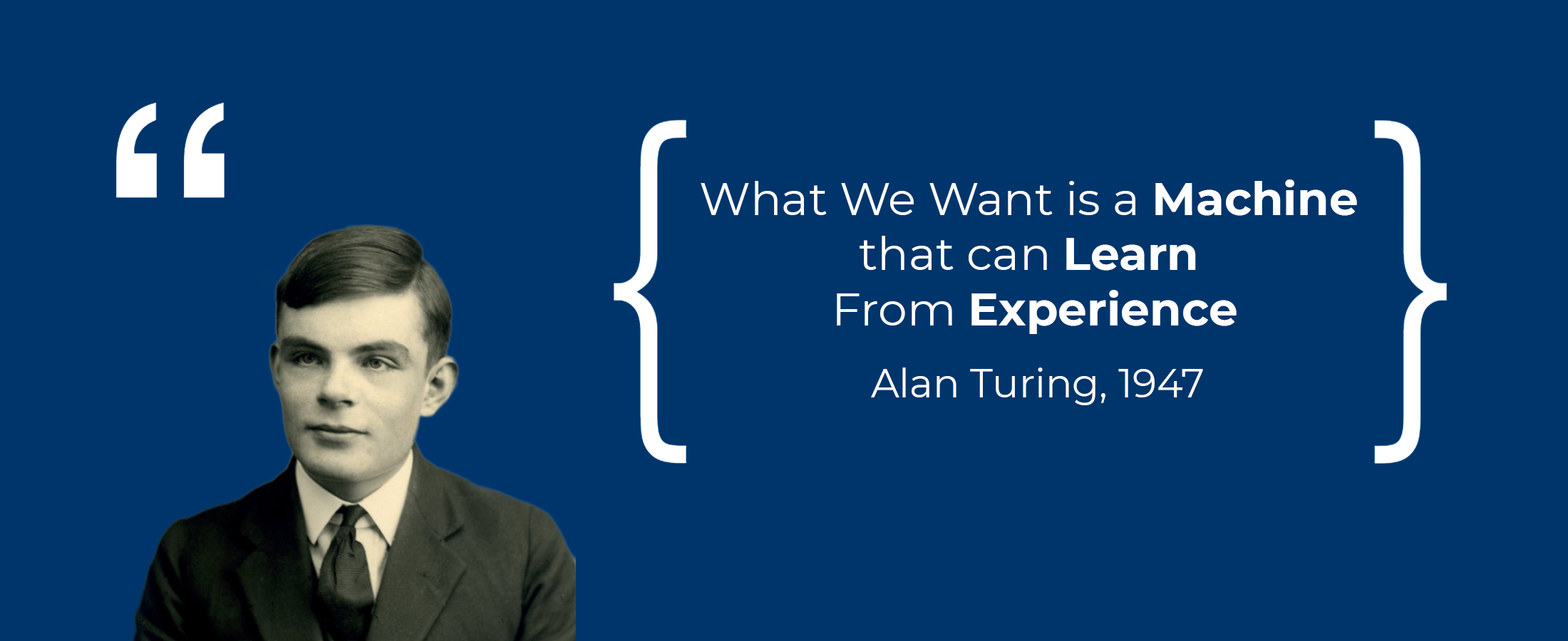
<style>
.page{position:relative;width:1568px;height:641px;background:#00356b}
.page>*{position:absolute;margin:0}
.t1{font:46px "Montserrat-Regular";color:#ffffff}
.t2{font:46px "Montserrat-Bold";color:#ffffff}
.t3{font:39.6px "Montserrat-Regular";color:#ffffff}
</style>
<div class="page">
<p class="t1" style="left:701px;top:180px;width:656px;height:154px;text-align:center">What We Want is a <span class="t2">Machine</span> <br>that can <span class="t2">Learn</span> <br>From <span class="t2">Experience</span></p>
<p class="t3" style="left:871px;top:368px;width:332px;height:38px">Alan Turing, 1947</p>
</div>
